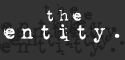
<style>
.page{position:relative;width:125px;height:60px;background:#333333}
.page>*{position:absolute;margin:0}
.t1{font:24px "1942report";letter-spacing:0.1em;color:#ffffff}
.t2{font:18px "1942report";letter-spacing:0.1em;color:#ffffff}
</style>
<div class="page">
<p class="t1" style="left:3px;top:10px;width:117px;height:33px"><span class="t2">the </span>entity.</p>
</div>
